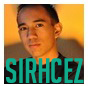
<style>
.page{position:relative;width:88px;height:86px}
.page>*{position:absolute;margin:0}
.t1{font:34px "BigNoodleTitling";color:#0fab8c}
</style>
<div class="page">
<p class="t1" style="left:6px;top:58px;width:78px;height:25px">SirhcEz</p>
</div>
